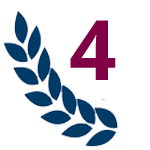
<style>
.page{position:relative;width:150px;height:150px;background:#ffffff}
.page>*{position:absolute;margin:0}
.t1{font:83.3px "OpenSans-Bold";color:#800144;text-transform:uppercase}
</style>
<div class="page">
<p class="t1" style="left:70px;top:20px;width:46px;height:60px">4</p>
</div>
